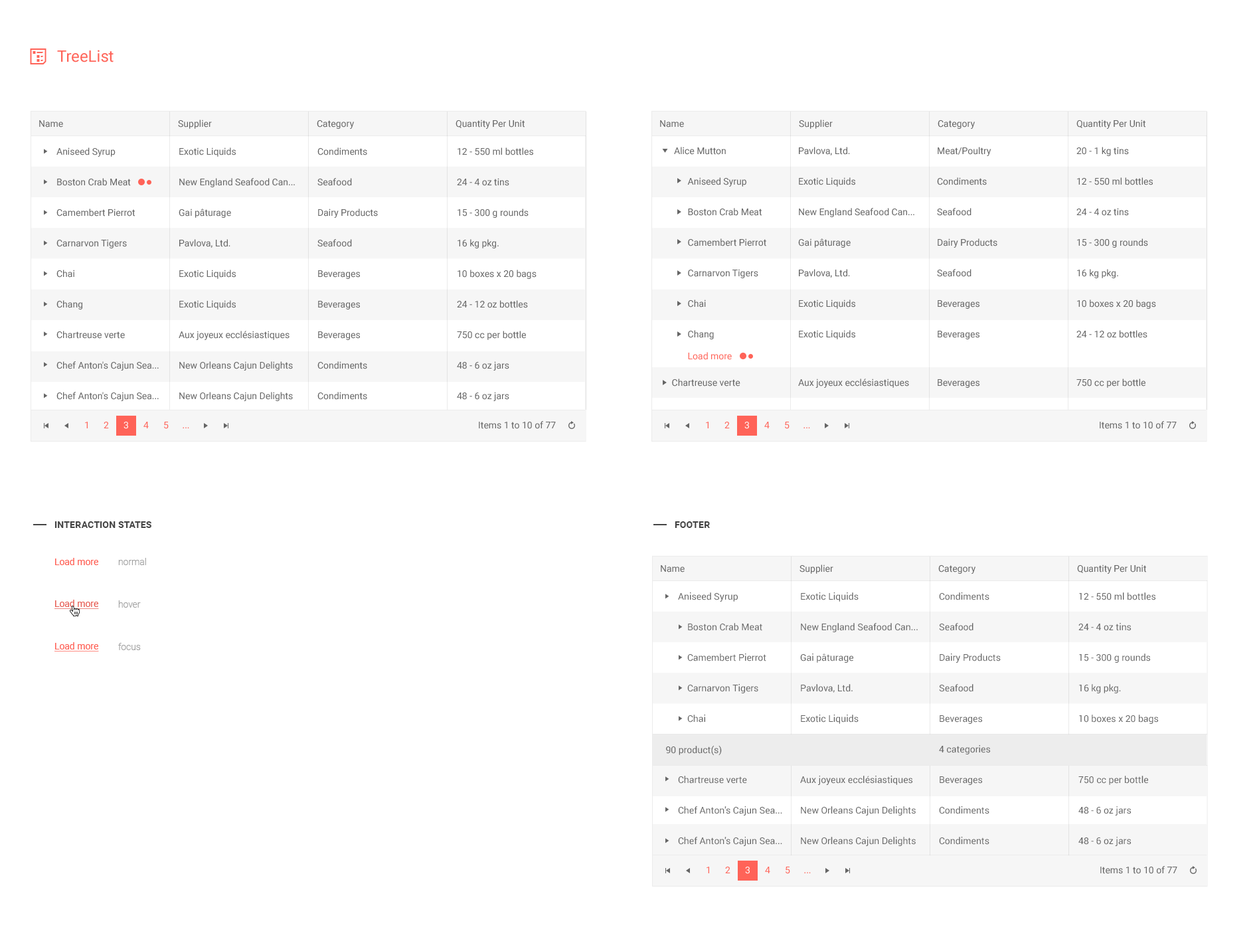
<style>
.page{position:relative;width:1259px;height:947px;background:#ffffff}
.page>*{position:absolute;margin:0}
.t1{font:15.9px "Roboto-Regular";color:#ff6358}
.t2{font:9.3px "Roboto-Regular";color:#656565}
.t3{font:9.3px/30.5px "Roboto-Regular";color:#656565}
.t4{font:9.3px/48.5px "Roboto-Regular";color:#656565}
.t5{font:9.3px "Roboto-Regular";color:#ff6358}
.t6{font:9.3px "Roboto-Regular";color:#ffffff}
.t7{font:9.3px "Roboto-Bold";letter-spacing:0.01em;color:#454545;text-transform:uppercase}
.t8{font:9.3px/42.5px "Roboto-Light";color:#a1a1a1}
.t9{font:9.3px "Roboto-Regular";color:#e76057;text-decoration:underline}
.t10{font:9.3px "Roboto-Regular";color:#ff6358;text-decoration:underline}
</style>
<div class="page">
<p class="t1" style="left:57px;top:50px;width:57px;height:12px">TreeList</p>
<p class="t2" style="left:39px;top:120px;width:24px;height:8px">Name</p>
<p class="t3" style="left:56px;top:117px;width:103px;height:284px">Alice Mutton<br>Aniseed Syrup<br>Boston Crab Meat<br>Camembert Pierrot<br>Carnarvon Tigers<br>Chai<br>Chang<br>Chartreuse verte<br>Chef Anton's Cajun Sea...<br>Chef Anton's Cajun Sea...</p>
<p class="t2" style="left:178px;top:120px;width:34px;height:9px">Supplier</p>
<p class="t3" style="left:179px;top:117px;width:116px;height:284px">Pavlova, Ltd.<br>Exotic Liquids<br>New England Seafood Can...<br>Gai pâturage<br>Pavlova, Ltd.<br>Exotic Liquids<br>Exotic Liquids<br>Aux joyeux ecclésiastiques<br>New Orleans Cajun Delights<br>New Orleans Cajun Delights</p>
<p class="t2" style="left:317px;top:120px;width:37px;height:9px">Category</p>
<p class="t3" style="left:317px;top:117px;width:61px;height:283px">Meat/Poultry<br>Condiments<br>Seafood<br>Dairy Products<br>Seafood<br>Beverages<br>Beverages<br>Beverages<br>Condiments<br>Condiments</p>
<p class="t2" style="left:456px;top:120px;width:69px;height:9px">Quantity Per Unit</p>
<p class="t3" style="left:457px;top:117px;width:80px;height:284px">20 - 1 kg tins<br>12 - 550 ml bottles<br>24 - 4 oz tins<br>15 - 300 g rounds<br>16 kg pkg.<br>10 boxes x 20 bags<br>24 - 12 oz bottles<br>750 cc per bottle<br>48 - 6 oz jars<br>48 - 6 oz jars</p>
<p class="t2" style="left:660px;top:120px;width:24px;height:8px">Name</p>
<p class="t2" style="left:799px;top:120px;width:34px;height:9px">Supplier</p>
<p class="t2" style="left:938px;top:120px;width:37px;height:9px">Category</p>
<p class="t2" style="left:1077px;top:120px;width:69px;height:9px">Quantity Per Unit</p>
<p class="t2" style="left:674px;top:147px;width:52px;height:8px">Alice Mutton</p>
<p class="t3" style="left:798px;top:147px;width:116px;height:241px">Pavlova, Ltd.<br>Exotic Liquids<br>New England Seafood Can...<br>Gai pâturage<br>Pavlova, Ltd.<br>Exotic Liquids<br>Exotic Liquids<br><span class="t4">Aux joyeux ecclésiastiques</span></p>
<p class="t3" style="left:937px;top:147px;width:60px;height:241px">Meat/Poultry<br>Condiments<br>Seafood<br>Dairy Products<br>Seafood<br>Beverages<br>Beverages<br><span class="t4">Beverages</span></p>
<p class="t3" style="left:1077px;top:147px;width:79px;height:241px">20 - 1 kg tins<br>12 - 550 ml bottles<br>24 - 4 oz tins<br>15 - 300 g rounds<br>16 kg pkg.<br>10 boxes x 20 bags<br>24 - 12 oz bottles<br><span class="t4">750 cc per bottle</span></p>
<p class="t3" style="left:687px;top:177px;width:79px;height:162px">Aniseed Syrup<br>Boston Crab Meat<br>Camembert Pierrot<br>Carnarvon Tigers<br>Chai<br>Chang</p>
<p class="t5" style="left:688px;top:352px;width:44px;height:8px">Load more</p>
<p class="t2" style="left:672px;top:379px;width:68px;height:8px">Chartreuse verte</p>
<p class="t5" style="left:85px;top:422px;width:3px;height:6px">1</p>
<p class="t5" style="left:104px;top:422px;width:5px;height:6px">2</p>
<p class="t6" style="left:124px;top:422px;width:4px;height:7px">3</p>
<p class="t5" style="left:143px;top:422px;width:6px;height:6px">4</p>
<p class="t5" style="left:164px;top:422px;width:5px;height:7px">5</p>
<p class="t2" style="left:479px;top:421px;width:77px;height:8px">Items 1 to 10 of 77</p>
<p class="t5" style="left:706px;top:422px;width:3px;height:6px">1</p>
<p class="t5" style="left:725px;top:422px;width:5px;height:6px">2</p>
<p class="t6" style="left:744px;top:422px;width:5px;height:7px">3</p>
<p class="t5" style="left:764px;top:422px;width:6px;height:6px">4</p>
<p class="t5" style="left:785px;top:422px;width:5px;height:7px">5</p>
<p class="t2" style="left:1100px;top:421px;width:77px;height:8px">Items 1 to 10 of 77</p>
<p class="t5" style="left:183px;top:427px;width:6px;height:1px">...</p>
<p class="t5" style="left:804px;top:427px;width:6px;height:1px">...</p>
<p class="t7" style="left:54px;top:521px;width:97px;height:7px">interaction states</p>
<p class="t7" style="left:675px;top:521px;width:35px;height:7px">footer</p>
<p class="t5" style="left:55px;top:558px;width:43px;height:7px">Load more</p>
<p class="t8" style="left:118px;top:558px;width:28px;height:92px">normal<br>hover<br>focus</p>
<p class="t2" style="left:661px;top:565px;width:24px;height:7px">Name</p>
<p class="t3" style="left:678px;top:562px;width:104px;height:284px">Alice Mutton<br>Aniseed Syrup<br>    Boston Crab Meat<br>    Camembert Pierrot<br>    Carnarvon Tigers<br>    Chai<br><br>Chartreuse verte<br>Chef Anton's Cajun Sea...<br>Chef Anton's Cajun Sea...</p>
<p class="t2" style="left:800px;top:564px;width:33px;height:10px">Supplier</p>
<p class="t3" style="left:800px;top:562px;width:118px;height:284px">Pavlova, Ltd.<br>Exotic Liquids<br>New England Seafood Can...<br>Gai pâturage<br>Pavlova, Ltd.<br>Exotic Liquids<br><br>Aux joyeux ecclésiastiques<br>New Orleans Cajun Delights<br>New Orleans Cajun Delights</p>
<p class="t2" style="left:938px;top:565px;width:38px;height:9px">Category</p>
<p class="t3" style="left:939px;top:562px;width:62px;height:283px">Meat/Poultry<br>Condiments<br>Seafood<br>Dairy Products<br>Seafood<br>Beverages<br>4 categories<br>Beverages<br>Condiments<br>Condiments</p>
<p class="t2" style="left:1077px;top:564px;width:69px;height:10px">Quantity Per Unit</p>
<p class="t3" style="left:1079px;top:562px;width:80px;height:284px">20 - 1 kg tins<br>12 - 550 ml bottles<br>24 - 4 oz tins<br>15 - 300 g rounds<br>16 kg pkg.<br>10 boxes x 20 bags<br><br>750 cc per bottle<br>48 - 6 oz jars<br>48 - 6 oz jars</p>
<p class="t9" style="left:54px;top:600px;width:45px;height:9px">Load more</p>
<p class="t10" style="left:54px;top:642px;width:45px;height:9px">Load more</p>
<p class="t2" style="left:666px;top:745px;width:56px;height:11px">90 product(s)</p>
<p class="t5" style="left:707px;top:867px;width:2px;height:6px">1</p>
<p class="t5" style="left:725px;top:867px;width:6px;height:6px">2</p>
<p class="t6" style="left:745px;top:867px;width:5px;height:7px">3</p>
<p class="t5" style="left:765px;top:867px;width:5px;height:6px">4</p>
<p class="t5" style="left:786px;top:867px;width:4px;height:7px">5</p>
<p class="t2" style="left:1100px;top:866px;width:77px;height:8px">Items 1 to 10 of 77</p>
<p class="t5" style="left:804px;top:872px;width:7px;height:1px">...</p>
</div>
